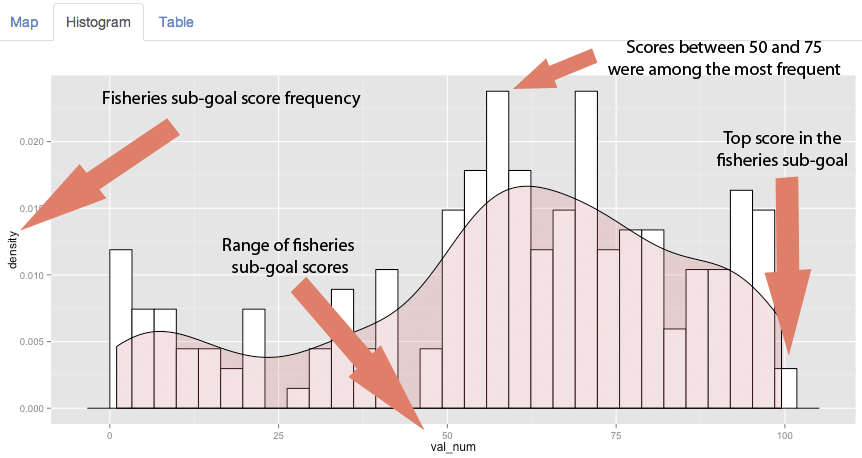
<style>
.page{position:relative;width:862px;height:458px;background:#e5e5e5}
.page>*{position:absolute;margin:0}
.t1{font:18px "MyriadPro-Regular";color:#000000}
</style>
<div class="page">
<p class="t1" style="left:608px;top:40px;width:233px;height:39px;text-align:center">Scores between 50 and 75<br>were among the most frequent</p>
<p class="t1" style="left:103px;top:91px;width:258px;height:17px">Fisheries sub-goal score frequency</p>
<p class="t1" style="left:716px;top:131px;width:131px;height:39px;text-align:center">Top score in the <br>fisheries sub-goal</p>
<p class="t1" style="left:223px;top:238px;width:131px;height:39px;text-align:center">Range of fisheries <br>sub-goal scores</p>
</div>
